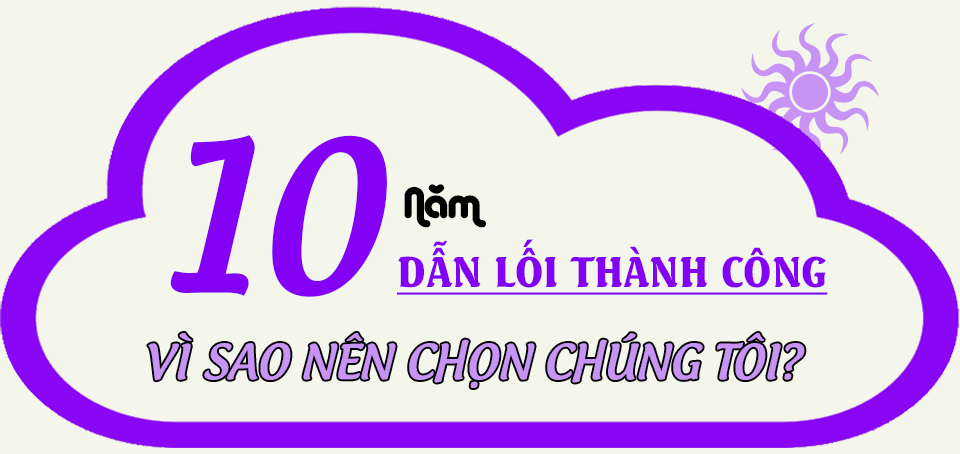
<style>
.page{position:relative;width:960px;height:454px;background:#f4f5eb}
.page>*{position:absolute;margin:0}
.t1{font:198.7px "UTM-Androgyne";color:#8301f5}
.t2{font:41.6px "UTM-Alba-Matter";color:#000000}
.t3{font:41.6px "UTMSeagullBold";color:#8301f5;text-decoration:underline}
</style>
<div class="page">
<p class="t1" style="left:170px;top:135px;width:217px;height:162px">10</p>
<p class="t2" style="left:404px;top:184px;width:82px;height:44px">Năm</p>
<p class="t3" style="left:397px;top:239px;width:431px;height:56px">DẪN LỐI THÀNH CÔNG</p>
</div>
